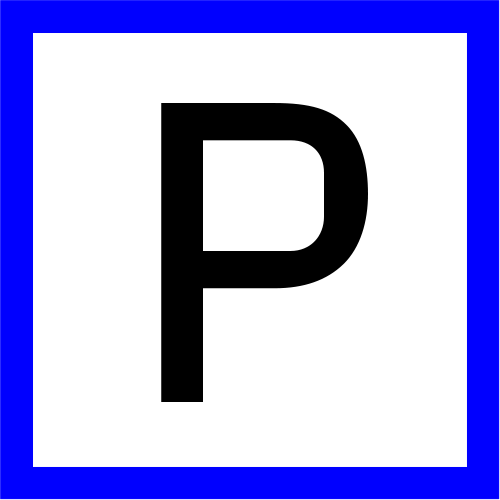
<style>
.page{position:relative;width:500px;height:500px;background:#ffffff}
.page>*{position:absolute;margin:0}
.t1{font:439px "PxGrotesk-Regular";color:#000000}
</style>
<div class="page">
<p class="t1" style="left:161px;top:103px;width:207px;height:299px">P</p>
</div>
